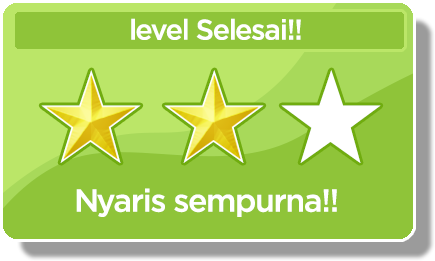
<style>
.page{position:relative;width:435px;height:261px;background:#8fc439}
.page>*{position:absolute;margin:0}
.t1{font:28.4px "iCielGotham-Medium";letter-spacing:-0.04em;color:#ffffff}
.t2{font:31.8px "iCielGotham-Medium";letter-spacing:-0.04em;color:#ffffff}
</style>
<div class="page">
<p class="t1" style="left:131px;top:18px;width:170px;height:22px">level Selesai!!</p>
<p class="t2" style="left:76px;top:188px;width:261px;height:29px">Nyaris sempurna!!</p>
</div>
